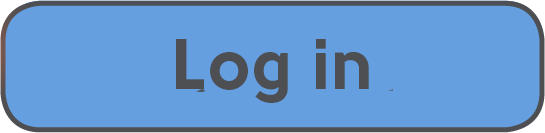
<style>
.page{position:relative;width:545px;height:133px;background:#659fe0}
.page>*{position:absolute;margin:0}
.t1{font:72px "Solomon-Sans-Bold";color:#4d4f52}
</style>
<div class="page">
<p class="t1" style="left:176px;top:39px;width:193px;height:64px">Log in</p>
</div>
